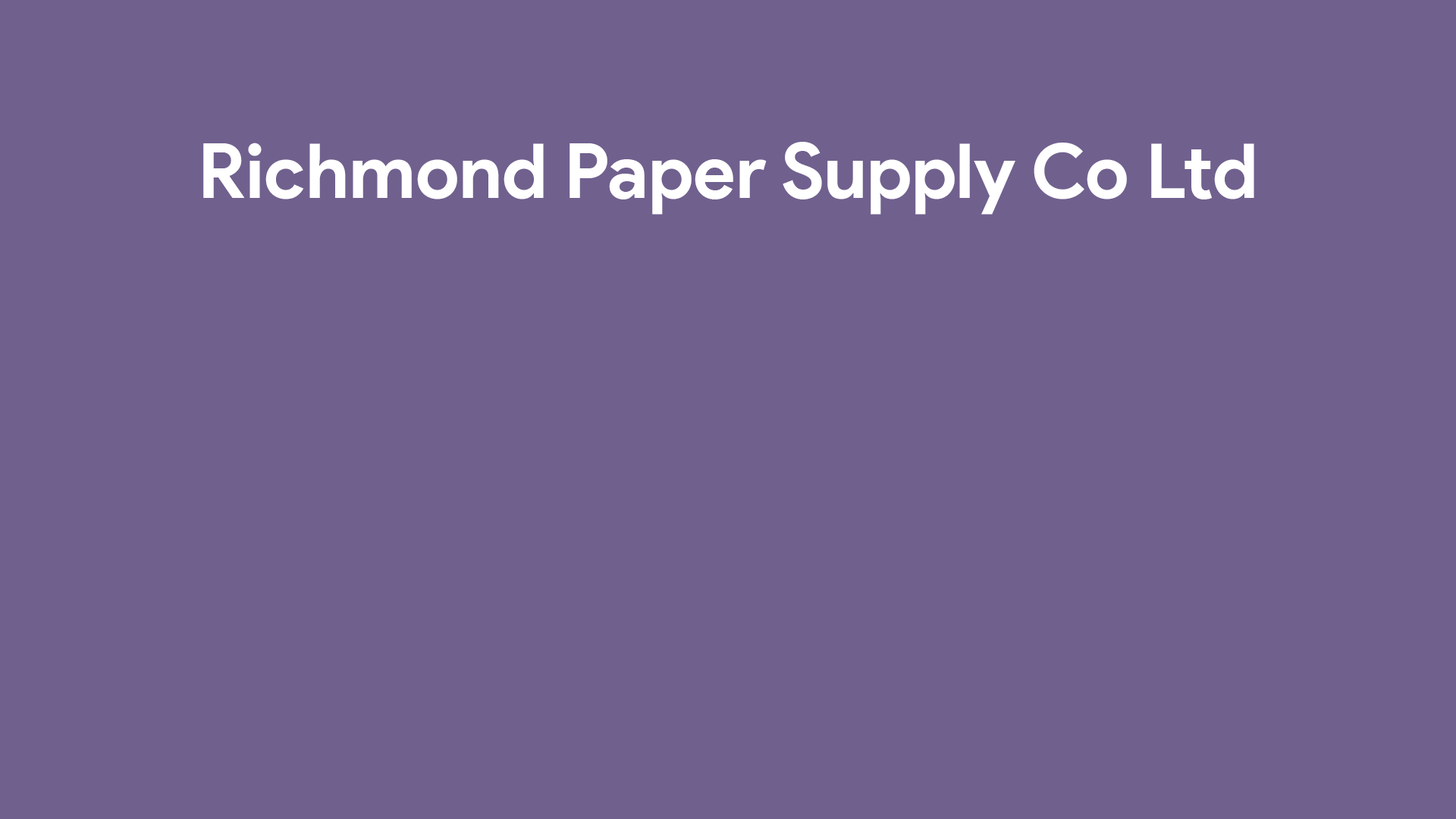
<style>
.page{position:relative;width:1456px;height:819px;background:#70608e}
.page>*{position:absolute;margin:0}
.t1{font:75.8px "ProductSans-Bold";color:#ffffff}
</style>
<div class="page">
<p class="t1" style="left:203px;top:142px;width:1051px;height:73px">Richmond Paper Supply Co Ltd</p>
</div>
